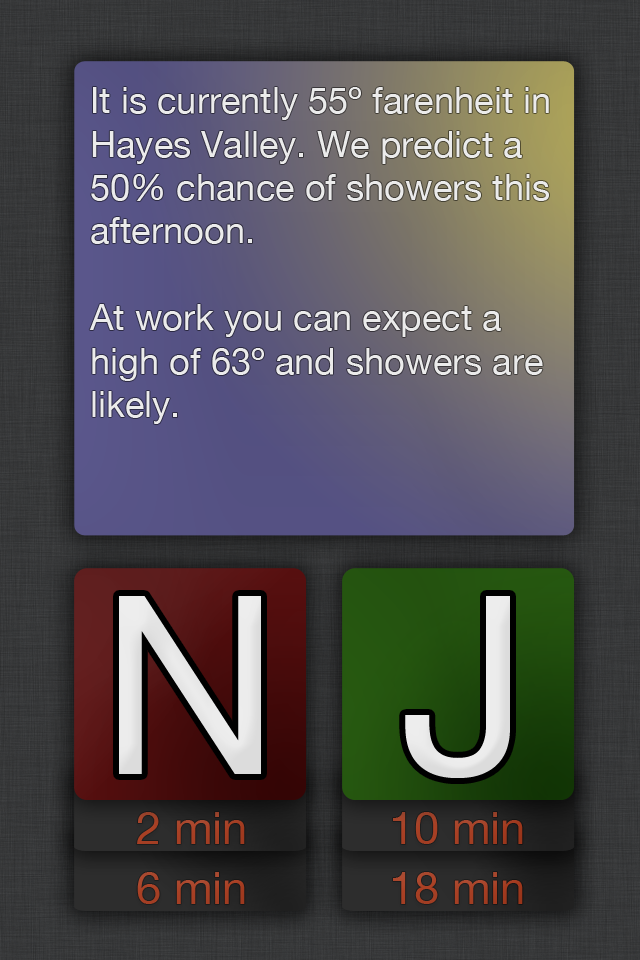
<style>
.page{position:relative;width:640px;height:960px}
.page>*{position:absolute;margin:0}
.t1{font:36.2px "HelveticaNeue";color:#ebebeb}
.t2{font:249px "HelveticaNeue";color:#f2f2f2}
.t3{font:45.3px "HelveticaNeue";color:#a64024}
.t4{font:45.3px "HelveticaNeue";color:#a43f24}
.t5{font:45.3px "HelveticaNeue";color:#a84024}
.t6{font:45.3px "HelveticaNeue";color:#a73f24}
</style>
<div class="page">
<p class="t1" style="left:89px;top:87px;width:460px;height:337px">It is currently 55º farenheit in <br>Hayes Valley. We predict a <br>50% chance of showers this <br>afternoon. <br><br>At work you can expect a <br>high of 63º and showers are<br>likely.</p>
<p class="t2" style="left:119px;top:596px;width:142px;height:178px">N</p>
<p class="t2" style="left:405px;top:596px;width:105px;height:182px">J</p>
<p class="t3" style="left:137px;top:812px;width:108px;height:32px">2 min</p>
<p class="t4" style="left:393px;top:812px;width:130px;height:32px">10 min</p>
<p class="t5" style="left:137px;top:872px;width:108px;height:32px">6 min</p>
<p class="t6" style="left:393px;top:872px;width:130px;height:32px">18 min</p>
</div>
